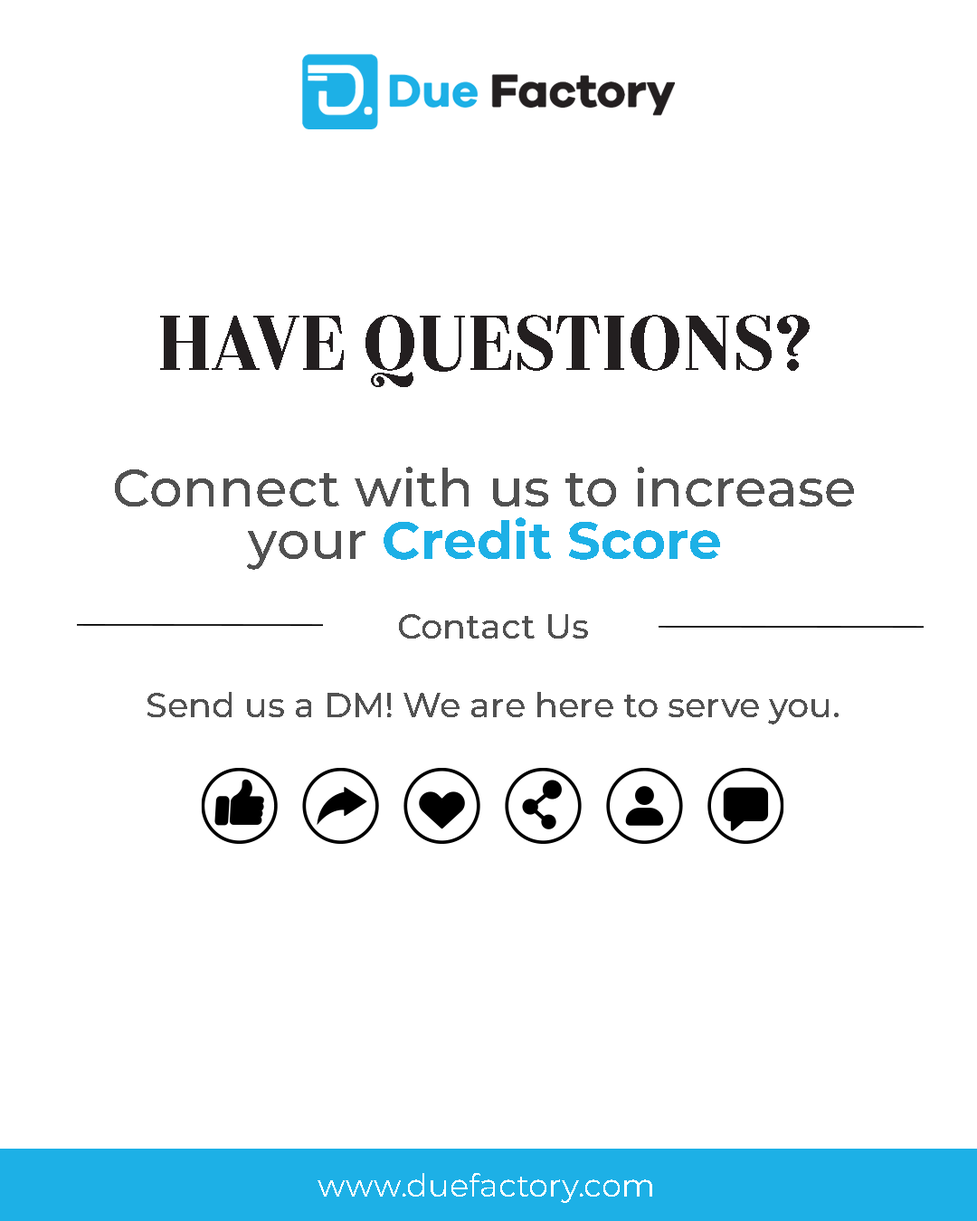
<style>
.page{position:relative;width:977px;height:1221px;background:#ffffff}
.page>*{position:absolute;margin:0}
.t1{font:67.8px "Couturier-SemiBold";color:#231f20}
.t2{font:52.8px/52.9px "Montserrat-Medium";color:#515151}
.t3{font:52.8px/52.9px "Montserrat-Bold";color:#1db0e6}
.t4{font:33.9px "Montserrat-Medium";color:#515151}
.t5{font:32px "Montserrat-Regular";color:#ffffff}
</style>
<div class="page">
<p class="t1" style="left:160px;top:315px;width:649px;height:72px">HAVE QUESTIONS?</p>
<p class="t2" style="left:115px;top:467px;width:739px;height:103px;text-align:center">Connect with us to increase<br>your <span class="t3">Credit Score</span></p>
<p class="t4" style="left:399px;top:614px;width:189px;height:24px">Contact Us</p>
<p class="t4" style="left:147px;top:692px;width:691px;height:32px">Send us a DM! We are here to serve you.</p>
<p class="t5" style="left:317px;top:1173px;width:335px;height:30px">www.duefactory.com</p>
</div>
